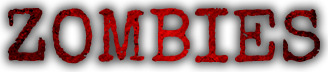
<style>
.page{position:relative;width:328px;height:72px}
.page>*{position:absolute;margin:0}
.t1{font:75.1px "SpecialElite-Regular"}
</style>
<div class="page">
<p class="t1" style="left:7px;top:7px;width:313px;height:57px">ZOMBIES</p>
</div>
